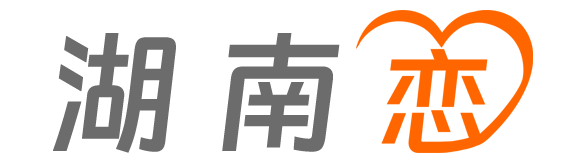
<style>
.page{position:relative;width:576px;height:162px;background:#ffffff}
.page>*{position:absolute;margin:0}
.t1{font:137.6px "DingTalk-JinBuTi";letter-spacing:0.16em;color:#6c6c6c;font-weight:bold}
</style>
<div class="page">
<p class="t1" style="left:53px;top:33px;width:287px;height:120px">湖南</p>
</div>
